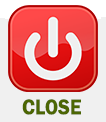
<style>
.page{position:relative;width:106px;height:122px;background:#f0f0f0}
.page>*{position:absolute;margin:0}
.t1{font:21.9px "FranklinGothic-Demi";color:#4c6603;scale:0.93 1}
</style>
<div class="page">
<p class="t1" style="left:22px;top:99px;width:59px;height:16px">CLOSE</p>
</div>
